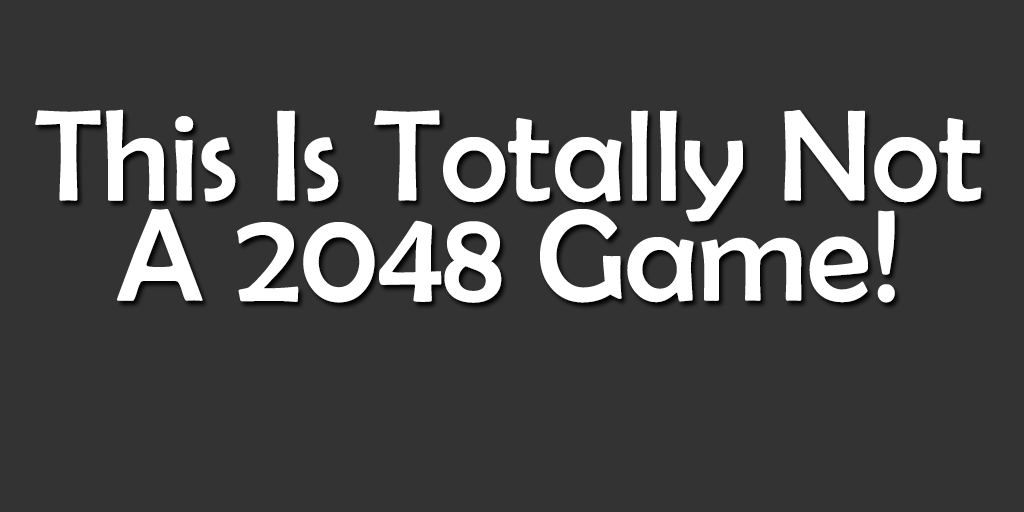
<style>
.page{position:relative;width:1024px;height:512px;background:#333333}
.page>*{position:absolute;margin:0}
.t1{font:131px "BerlinSansFB-Reg";color:#ffffff}
</style>
<div class="page">
<p class="t1" style="left:35px;top:109px;width:947px;height:194px">This Is Totally Not A 2048 Game!</p>
</div>
